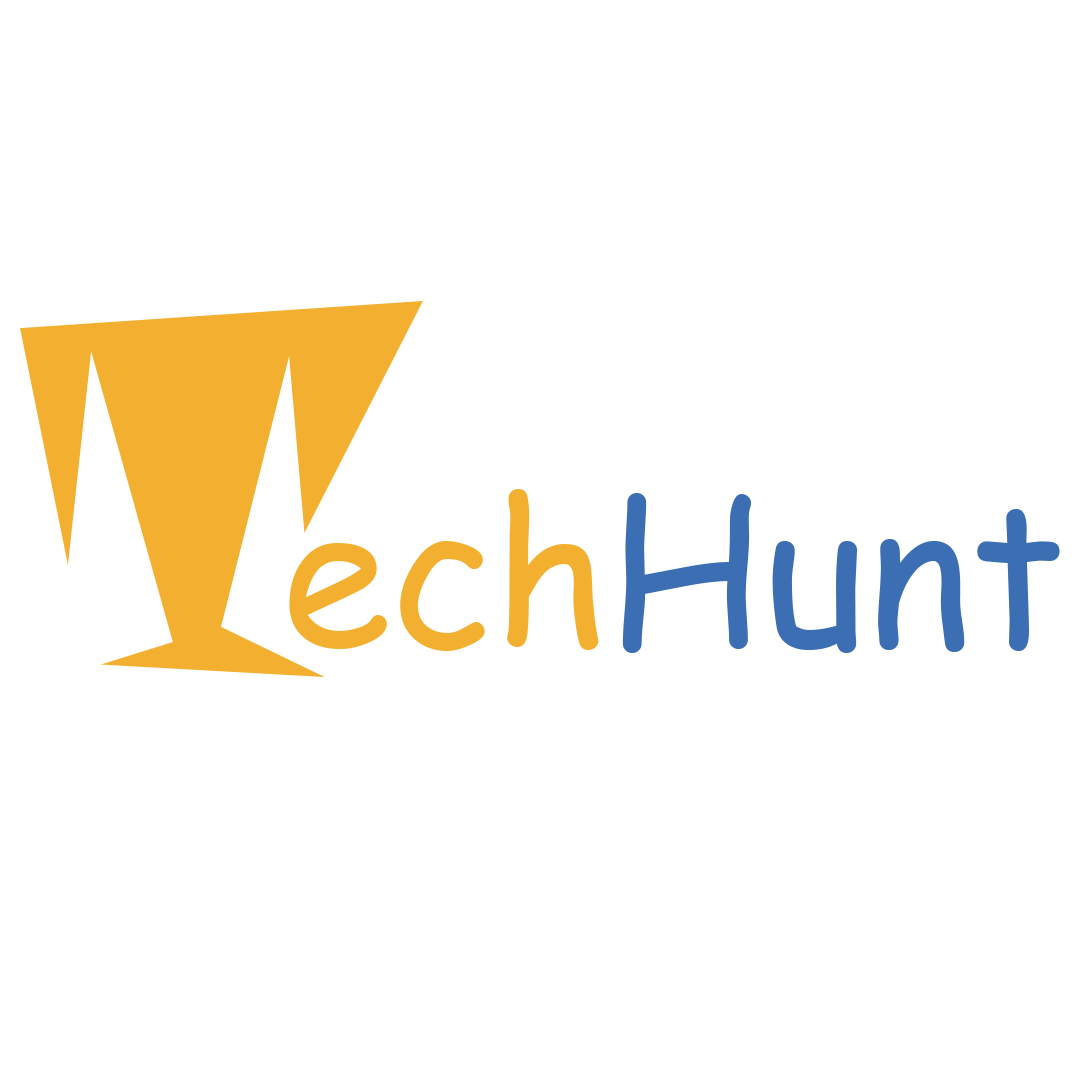
<style>
.page{position:relative;width:1080px;height:1080px;background:#ffffff}
.page>*{position:absolute;margin:0}
.t1{font:500px "SnapITC-Regular";color:#f3b030}
.t2{font:200px "ComicSansMS";color:#3c6eb4}
.t3{font:200px "ComicSansMS";color:#f3b030}
</style>
<div class="page">
<p class="t1" style="left:20px;top:300px;width:403px;height:377px">T</p>
<p class="t2" style="left:289px;top:488px;width:771px;height:165px"><span class="t3">ech</span>Hunt</p>
</div>
